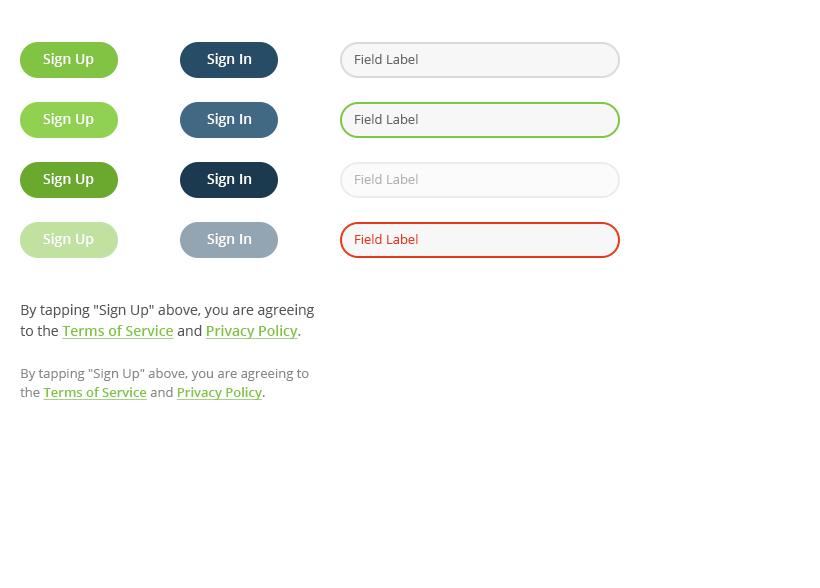
<style>
.page{position:relative;width:820px;height:588px;background:#ffffff}
.page>*{position:absolute;margin:0}
.t1{font:14px "OpenSans-Semibold";color:#ffffff}
.t2{font:13px "OpenSans";color:#666666}
.t3{font:13px "OpenSans";color:#b2b2b2}
.t4{font:13px "OpenSans";color:#e8381c}
.t5{font:14px/21px "OpenSans";color:#555555}
.t6{font:14px/21px "OpenSans-Semibold";color:#81c342;text-decoration:underline}
.t7{font:14px/21px "OpenSans";color:#888888}
.t8{font:13px/19px "OpenSans";color:#888888}
.t9{font:13px/19px "OpenSans-Semibold";color:#81c342;text-decoration:underline}
</style>
<div class="page">
<p class="t1" style="left:43px;top:53px;width:51px;height:14px">Sign Up</p>
<p class="t1" style="left:207px;top:53px;width:45px;height:14px">Sign In</p>
<p class="t2" style="left:355px;top:54px;width:63px;height:10px">Field Label</p>
<p class="t1" style="left:43px;top:113px;width:51px;height:14px">Sign Up</p>
<p class="t1" style="left:207px;top:113px;width:45px;height:14px">Sign In</p>
<p class="t2" style="left:355px;top:114px;width:63px;height:10px">Field Label</p>
<p class="t1" style="left:43px;top:173px;width:51px;height:14px">Sign Up</p>
<p class="t1" style="left:207px;top:173px;width:45px;height:14px">Sign In</p>
<p class="t3" style="left:355px;top:174px;width:63px;height:10px">Field Label</p>
<p class="t1" style="left:43px;top:233px;width:51px;height:14px">Sign Up</p>
<p class="t1" style="left:207px;top:233px;width:45px;height:14px">Sign In</p>
<p class="t4" style="left:355px;top:234px;width:63px;height:10px">Field Label</p>
<p class="t5" style="left:20px;top:304px;width:294px;height:35px">By tapping "Sign Up" above, you are agreeing to the <span class="t6">Terms of Service </span>and <span class="t6">Privacy Policy</span><span class="t7">.</span></p>
<p class="t8" style="left:20px;top:368px;width:289px;height:32px">By tapping "Sign Up" above, you are agreeing to the <span class="t9">Terms of Service</span> and <span class="t9">Privacy Policy</span>.</p>
</div>
